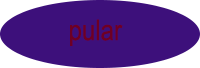
<style>
.page{position:relative;width:200px;height:68px;background:#3d107b}
.page>*{position:absolute;margin:0}
.t1{font:28.8px "ArialMT";color:#6e0023;scale:0.83 1}
</style>
<div class="page">
<p class="t1" style="left:70px;top:19px;width:53px;height:27px">pular</p>
</div>
